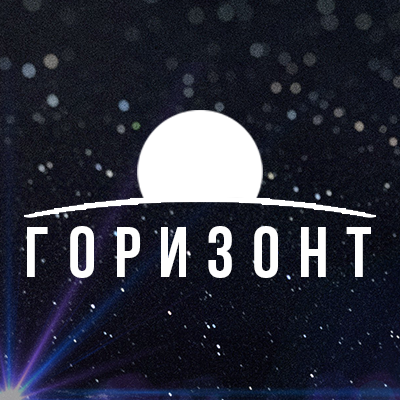
<style>
.page{position:relative;width:400px;height:400px}
.page>*{position:absolute;margin:0}
.t1{font:70.9px "BebasNeueBold";letter-spacing:0.25em;color:#fefefe}
</style>
<div class="page">
<p class="t1" style="left:27px;top:226px;width:344px;height:52px">ГОРИЗОНТ</p>
</div>
